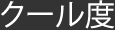
<style>
.page{position:relative;width:115px;height:30px;background:#333333}
.page>*{position:absolute;margin:0}
.t1{font:30px "KozGoPr6N-Regular";color:#ffffff}
</style>
<div class="page">
<p class="t1" style="left:1px;top:0px;width:113px;height:29px">クール度</p>
</div>
